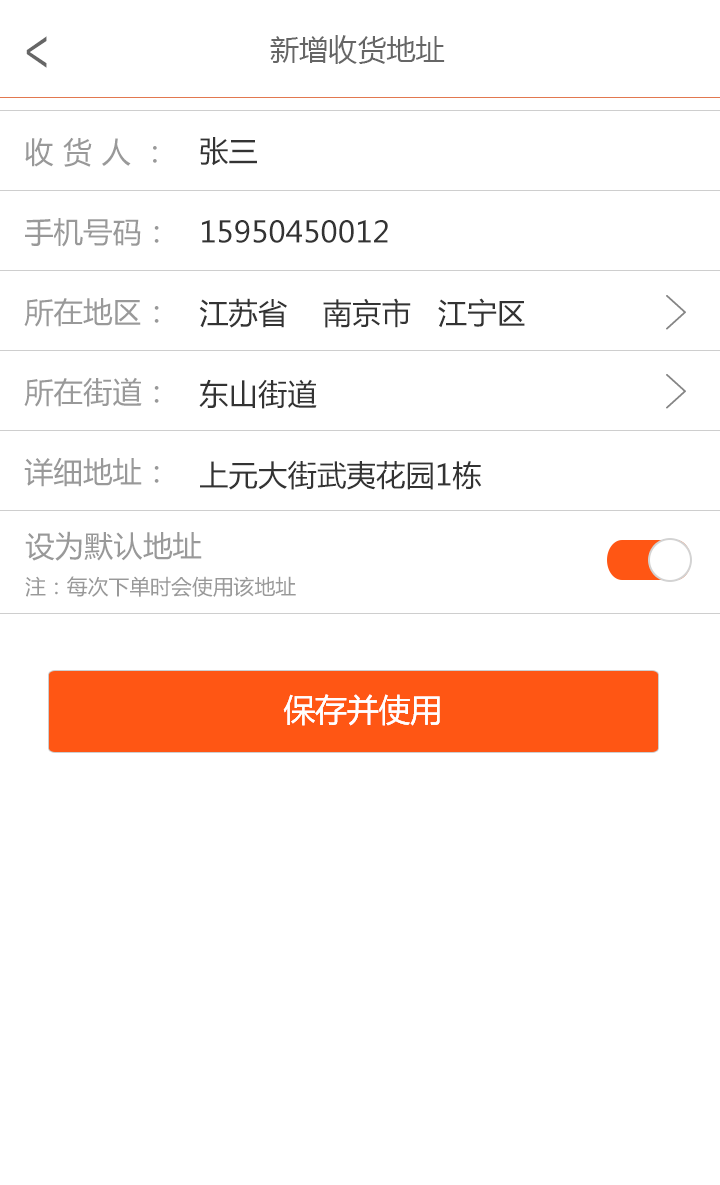
<style>
.page{position:relative;width:720px;height:1185px;background:#ffffff}
.page>*{position:absolute;margin:0}
.t1{font:51.9px "AdobeHeitiStd-Regular";color:#666666;scale:0.72 1}
.t2{font:29.2px "MicrosoftYaHei";color:#666666}
.t3{font:29.5px "MicrosoftYaHei";letter-spacing:0.32em;color:#999999}
.t4{font:29.5px "MicrosoftYaHei";color:#999999}
.t5{font:29.5px/81px "MicrosoftYaHei";letter-spacing:0.005em;color:#333333}
.t6{font:29.5px "MicrosoftYaHei";letter-spacing:0.005em;color:#999999}
.t7{font:20.8px/37.5px "MicrosoftYaHei";letter-spacing:0.005em;color:#999999}
.t8{font:29.5px/37.5px "MicrosoftYaHei";letter-spacing:0.005em;color:#999999}
.t9{font:31.7px "MicrosoftYaHei";color:#fffefe}
</style>
<div class="page">
<p class="t1" style="left:26px;top:36px;width:21px;height:32px;rotate:180deg">&gt;</p>
<p class="t2" style="left:270px;top:35px;width:175px;height:29px">新增收货地址</p>
<p class="t3" style="left:25px;top:137px;width:132px;height:30px">收货人<span class="t4">：</span></p>
<p class="t5" style="left:199px;top:137px;width:326px;height:353px">张三<br>15950450012<br>江苏省    南京市   江宁区<br>东山街道<br>上元大街武夷花园1栋</p>
<p class="t6" style="left:25px;top:218px;width:134px;height:29px">手机号码：</p>
<p class="t6" style="left:24px;top:298px;width:135px;height:29px">所在地区：</p>
<p class="t6" style="left:24px;top:377px;width:135px;height:30px">所在街道：</p>
<p class="t6" style="left:24px;top:457px;width:135px;height:30px">详细地址：</p>
<p class="t7" style="left:25px;top:531px;width:271px;height:66px"><span class="t8">设为默认地址<br></span>注：每次下单时会使用该地址</p>
<p class="t9" style="left:283px;top:694px;width:157px;height:32px">保存并使用</p>
<p class="t9" style="left:283px;top:694px;width:157px;height:32px">保存并使用</p>
</div>
